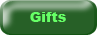
<style>
.page{position:relative;width:97px;height:35px;background:#276027}
.page>*{position:absolute;margin:0}
.t1{font:14px "Arial-Black";color:#66ff66}
</style>
<div class="page">
<p class="t1" style="left:30px;top:12px;width:36px;height:10px">Gifts</p>
</div>
